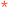
<style>
.page{position:relative;width:9px;height:9px;background:#ffffff}
.page>*{position:absolute;margin:0}
.t1{font:17px "MicrosoftYaHei";letter-spacing:-0.025em;color:#ff503f}
</style>
<div class="page">
<p class="t1" style="left:1px;top:0px;width:7px;height:7px">*</p>
</div>
